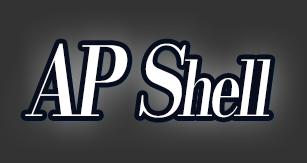
<style>
.page{position:relative;width:307px;height:163px;background:#333333}
.page>*{position:absolute;margin:0}
.t1{font:96px "KochoStd-Heavy";letter-spacing:-0.08em;color:#ffffff;font-style:italic;scale:0.75 1}
.t2{font:76.8px "KochoStd-Heavy";letter-spacing:-0.08em;color:#ffffff;font-style:italic;scale:0.75 1}
</style>
<div class="page">
<p class="t1" style="left:25px;top:43px;width:246px;height:75px">AP S<span class="t2">hell</span></p>
</div>
